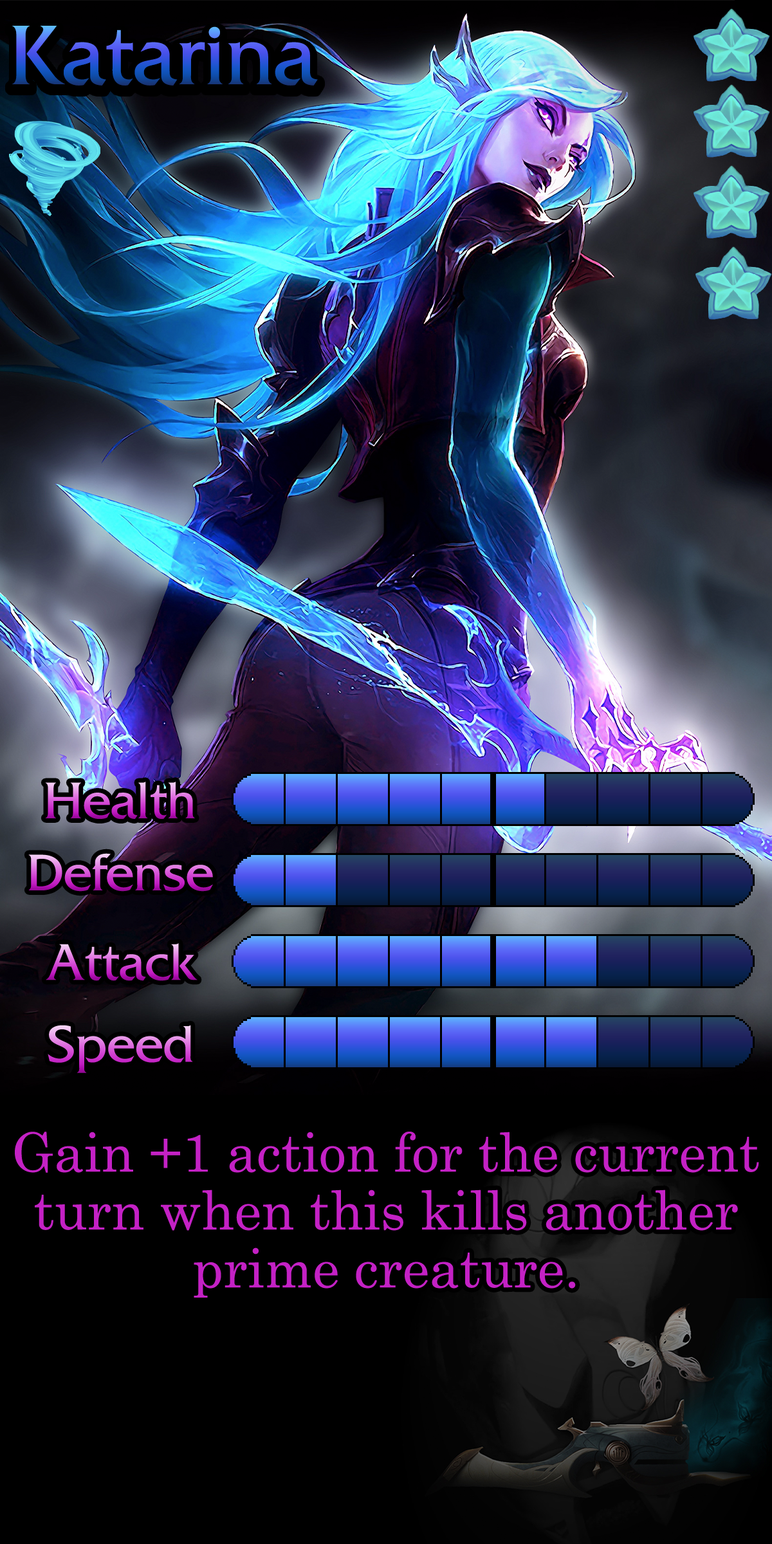
<style>
.page{position:relative;width:772px;height:1544px}
.page>*{position:absolute;margin:0}
.t1{font:152.5px "FrizQuadrataStd"}
.t2{font:92.7px "FrizQuadrataStd"}
.t3{font:92.7px/57.9px "Century";color:#c421c5}
</style>
<div class="page">
<p class="t1" style="left:12px;top:26px;width:306px;height:60px">Katarina</p>
<p class="t2" style="left:45px;top:782px;width:150px;height:37px">Health</p>
<p class="t2" style="left:28px;top:853px;width:185px;height:39px">Defense</p>
<p class="t2" style="left:46px;top:943px;width:152px;height:38px">Attack</p>
<p class="t2" style="left:48px;top:1025px;width:145px;height:48px">Speed</p>
<p class="t3" style="left:15px;top:1132px;width:744px;height:166px;text-align:center">Gain +1 action for the current turn when this kills another prime creature.</p>
</div>
